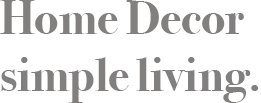
<style>
.page{position:relative;width:261px;height:103px;background:#ffffff}
.page>*{position:absolute;margin:0}
.t1{font:48px "BodoniSvtyTwoITCTT-Bold";color:#827f7f}
</style>
<div class="page">
<p class="t1" style="left:0px;top:0px;width:259px;height:103px">Home Decor<br>simple living.</p>
</div>
